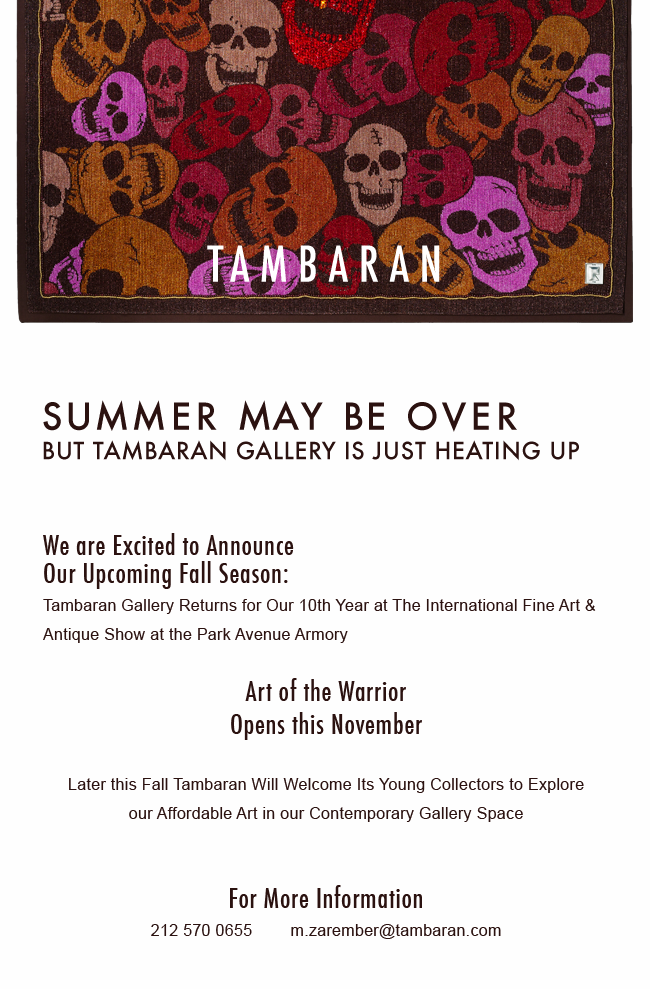
<style>
.page{position:relative;width:650px;height:989px;background:#fefefe}
.page>*{position:absolute;margin:0}
.t1{font:48px "Futura-CondensedMedium";letter-spacing:0.22em;color:#ffffff}
.t2{font:23.3px/29.6px "Futura-Medium";letter-spacing:0.02em;color:#2b1210;text-transform:uppercase}
.t3{font:36.3px "Futura-Medium";letter-spacing:0.12em;color:#2b1210;text-transform:uppercase}
.t4{font:23.3px "Futura-Medium";letter-spacing:0.04em;color:#2b1210;text-transform:uppercase}
.t5{font:16px/28.3px "ArialMT";letter-spacing:0.02em;color:#2b1210}
.t6{font:27.4px/28.3px "Futura-CondensedMedium";letter-spacing:0.02em;color:#2b1210}
.t7{font:27.4px/32.9px "Futura-CondensedMedium";letter-spacing:0.02em;color:#2b1210}
</style>
<div class="page">
<p class="t1" style="left:207px;top:245px;width:233px;height:37px">TAMBARAN</p>
<p class="t2" style="left:43px;top:400px;width:536px;height:61px"><span class="t3">SUMMER MAY BE OVER <br></span>BUT TAMBARAN GALLERY IS JUST HEATING UP<br><br><span class="t4"></span></p>
<p class="t5" style="left:43px;top:533px;width:553px;height:406px"><span class="t6">We are Excited to Announce <br>Our Upcoming Fall Season:<br></span>Tambaran Gallery Returns for Our 10th Year at The International Fine Art &amp; Antique Show at the Park Avenue Armory<br><br><span class="t7">Art of the Warrior <br>Opens this November</span><br><br>Later this Fall Tambaran Will Welcome Its Young Collectors to Explore <br>our Affordable Art in our Contemporary Gallery Space<br><br><br><span class="t7">For More Information</span><br>212 570 0655        m.zarember@tambaran.com</p>
</div>
